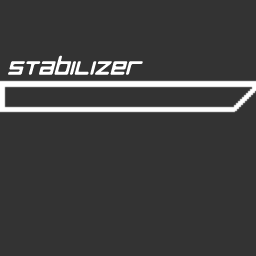
<style>
.page{position:relative;width:256px;height:256px;background:#333333}
.page>*{position:absolute;margin:0}
.t1{font:24px "RazerOblique";color:#ffffff}
</style>
<div class="page">
<p class="t1" style="left:8px;top:55px;width:135px;height:20px">Stabilizer</p>
</div>
